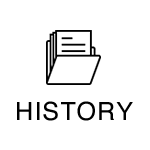
<style>
.page{position:relative;width:150px;height:150px;background:#ffffff}
.page>*{position:absolute;margin:0}
.t1{font:25px "Helvetica";letter-spacing:0.05em;color:#000000}
</style>
<div class="page">
<p class="t1" style="left:17px;top:101px;width:116px;height:20px">HISTORY</p>
</div>
